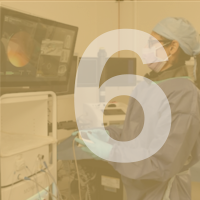
<style>
.page{position:relative;width:200px;height:200px}
.page>*{position:absolute;margin:0}
.t1{font:187.5px "PostGrotesk-Bold";color:#cfc5b1}
</style>
<div class="page">
<p class="t1" style="left:74px;top:28px;width:98px;height:135px">6</p>
</div>
